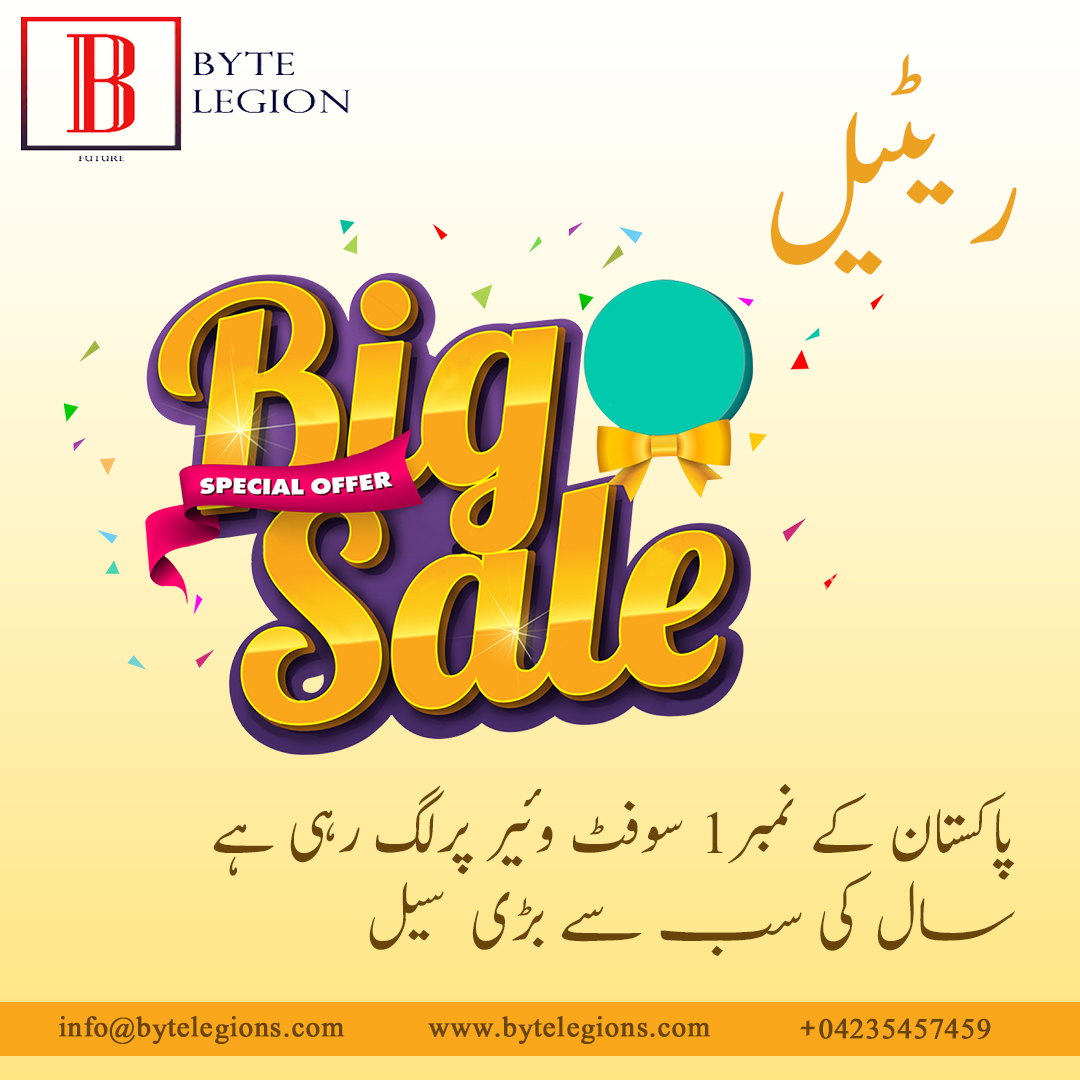
<style>
.page{position:relative;width:1080px;height:1080px}
.page>*{position:absolute;margin:0}
.t1{font:166.7px "Jameel-Noori-Nastaleeq-Kasheeda";color:#eca121}
.t2{font:73.9px/87.9px "Jameel-Noori-Nastaleeq";color:#694509}
.t3{font:73.9px/87.9px "Jameel-Noori-Nastaleeq-Kasheeda";color:#694509}
.t4{font:35px "Jameel-Noori-Nastaleeq-Kasheeda";color:#694509;font-weight:bold}
</style>
<div class="page">
<p class="t1" style="left:770px;top:54px;width:247px;height:221px">ریٹیل</p>
<p class="t2" style="left:213px;top:784px;width:803px;height:172px;text-align:right">پاکستان کے نمبر1 سوفٹ وئیر پرلگ رہی ہے<br> <span class="t3">سال کی سب سے بڑی سیل</span></p>
<p class="t4" style="left:59px;top:1016px;width:286px;height:28px">info@bytelegions.com</p>
<p class="t4" style="left:428px;top:1016px;width:283px;height:28px">www.bytelegions.com</p>
<p class="t4" style="left:800px;top:1018px;width:191px;height:21px">+04235457459</p>
</div>
